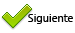
<style>
.page{position:relative;width:75px;height:33px;background:#ffffff}
.page>*{position:absolute;margin:0}
.t1{font:11px "SegoeUI";color:#000000}
</style>
<div class="page">
<p class="t1" style="left:28px;top:14px;width:45px;height:10px">Siguiente</p>
</div>
